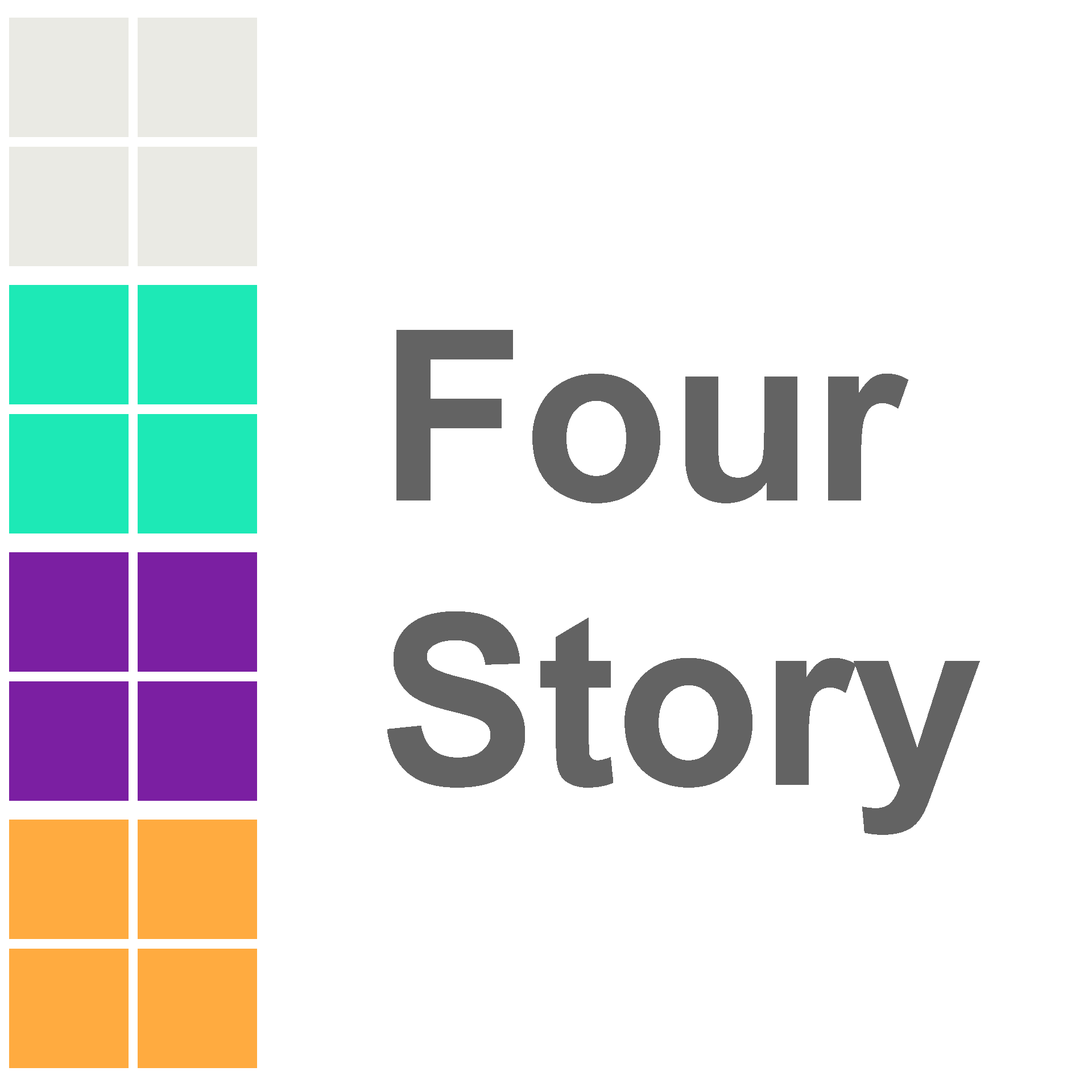
<style>
.page{position:relative;width:1092px;height:1092px;background:#ffffff}
.page>*{position:absolute;margin:0}
.t1{font:237px "Arial-BoldMT";color:#636363}
</style>
<div class="page">
<p class="t1" style="left:387px;top:330px;width:593px;height:505px">Four <br>Story</p>
</div>
